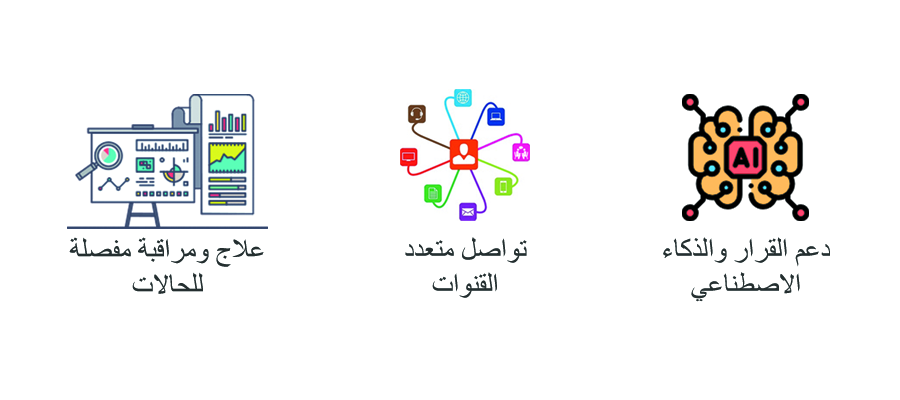
<style>
.page{position:relative;width:900px;height:400px;background:#ffffff}
.page>*{position:absolute;margin:0}
.t1{font:29.2px "TimesNewRomanPSMT";color:#242e2f}
</style>
<div class="page">
<p class="t1" style="left:69px;top:237px;width:195px;height:57px;text-align:center">علاج ومراقبة مفصلة للحالات</p>
<p class="t1" style="left:405px;top:237px;width:122px;height:61px;text-align:center">تواصل متعدد القنوات</p>
<p class="t1" style="left:663px;top:237px;width:167px;height:65px;text-align:center">دعم القرار والذكاء الاصطناعي</p>
</div>
